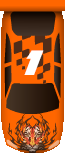
<style>
.page{position:relative;width:65px;height:153px;background:#ff6600}
.page>*{position:absolute;margin:0}
.t1{font:36.9px "Thunderstrike";color:#ffffff}
</style>
<div class="page">
<p class="t1" style="left:24px;top:50px;width:20px;height:25px">1</p>
</div>
